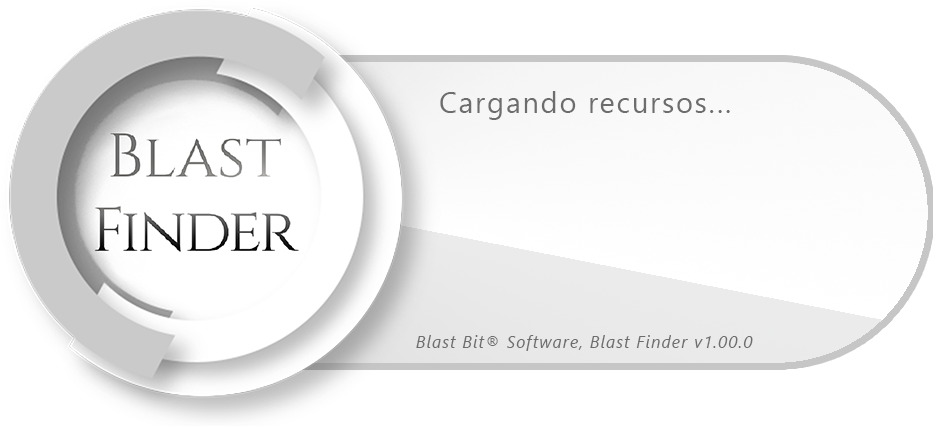
<style>
.page{position:relative;width:933px;height:426px;background:#ffffff}
.page>*{position:absolute;margin:0}
.t1{font:29.1px "SegoeUI";letter-spacing:0.06em;color:#6d6d6d}
.t2{font:17.1px "SegoeUI-Italic";letter-spacing:0.06em;color:#6d6d6d}
</style>
<div class="page">
<p class="t1" style="left:440px;top:91px;width:290px;height:29px">Cargando recursos...</p>
<p class="t2" style="left:416px;top:335px;width:337px;height:16px">Blast Bit® Software, Blast Finder v1.00.0</p>
</div>
